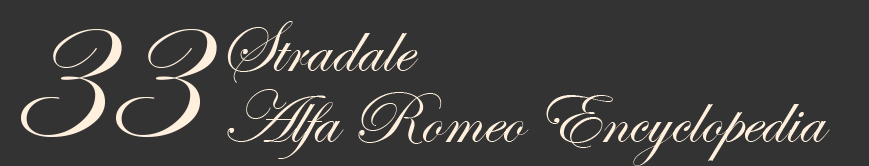
<style>
.page{position:relative;width:869px;height:166px;background:#333333}
.page>*{position:absolute;margin:0}
.t1{font:200px "EdwardianScriptITC";color:#ffefdd}
.t2{font:75px "EdwardianScriptITC";color:#ffefdd}
</style>
<div class="page">
<p class="t1" style="left:21px;top:29px;width:196px;height:108px">33</p>
<p class="t2" style="left:227px;top:21px;width:192px;height:62px">Stradale</p>
<p class="t2" style="left:227px;top:89px;width:603px;height:77px">Alfa Romeo Encyclopedia</p>
</div>
